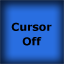
<style>
.page{position:relative;width:64px;height:64px;background:#296ee0}
.page>*{position:absolute;margin:0}
.t1{font:10.8px "Verdana-Bold";color:#000000}
</style>
<div class="page">
<p class="t1" style="left:11px;top:22px;width:41px;height:24px;text-align:center">Cursor<br>Off</p>
</div>
